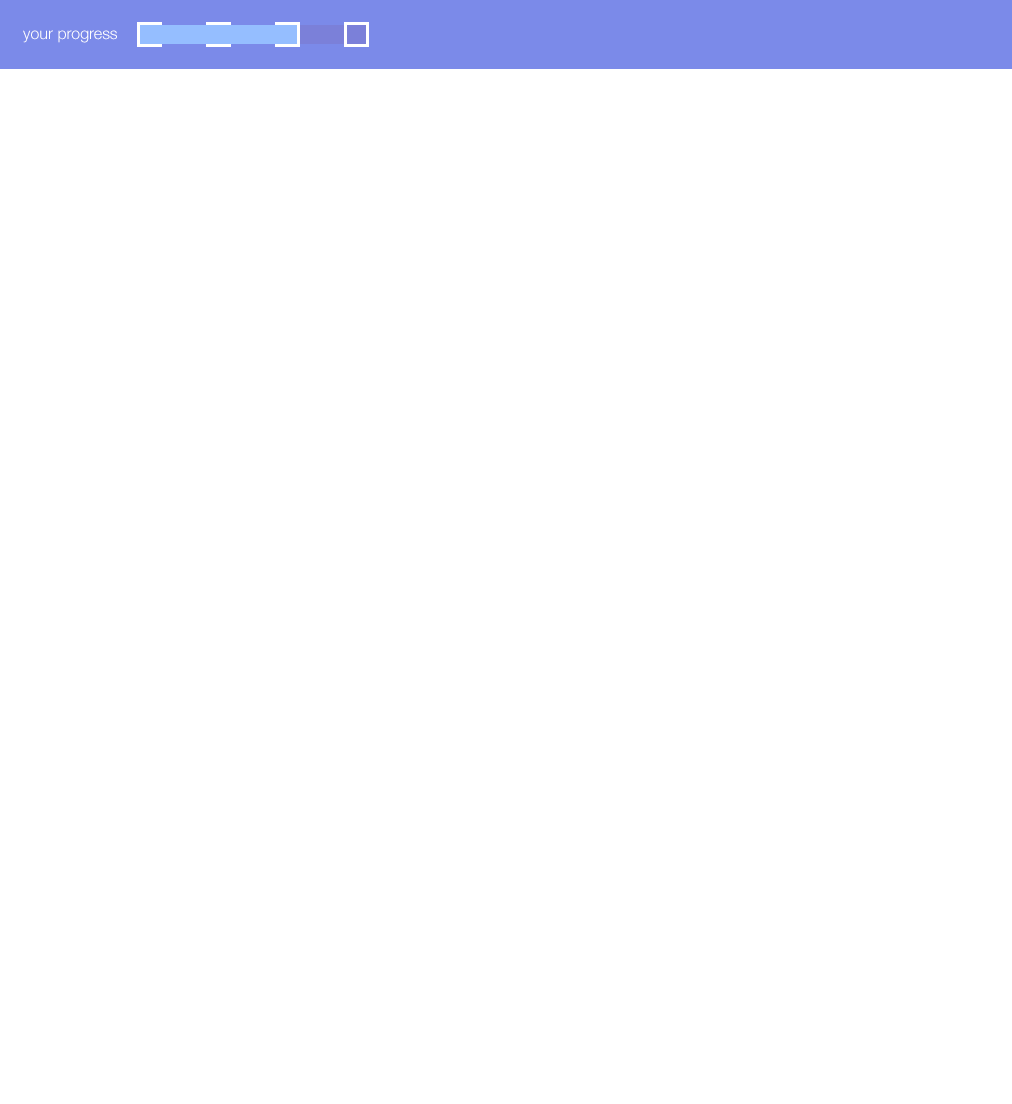
<style>
.page{position:relative;width:1012px;height:1104px;background:#ffffff}
.page>*{position:absolute;margin:0}
.t1{font:16px "HelveticaNeueLTStd-Lt";color:#ffffff}
</style>
<div class="page">
<p class="t1" style="left:23px;top:30px;width:94px;height:13px">your progress</p>
</div>
